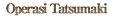
<style>
.page{position:relative;width:115px;height:20px;background:#ffffff}
.page>*{position:absolute;margin:0}
.t1{font:13px "RyuminPro-ExBold";letter-spacing:-0.11em;color:#705c43;font-weight:bold}
</style>
<div class="page">
<p class="t1" style="left:6px;top:3px;width:102px;height:13px">Operasi Tatsumaki</p>
</div>
